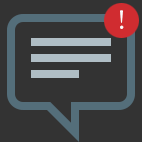
<style>
.page{position:relative;width:142px;height:142px;background:#333333}
.page>*{position:absolute;margin:0}
.t1{font:28px "AGaramondPro-Regular";color:#fbfcfc}
</style>
<div class="page">
<p class="t1" style="left:120px;top:10px;width:4px;height:19px">!</p>
</div>
